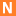
<style>
.page{position:relative;width:16px;height:16px;background:#ff7f27}
.page>*{position:absolute;margin:0}
.t1{font:14.7px "InspectionXpertGDT";color:#ffffff;font-weight:bold}
</style>
<div class="page">
<p class="t1" style="left:3px;top:2px;width:9px;height:12px">N</p>
</div>
